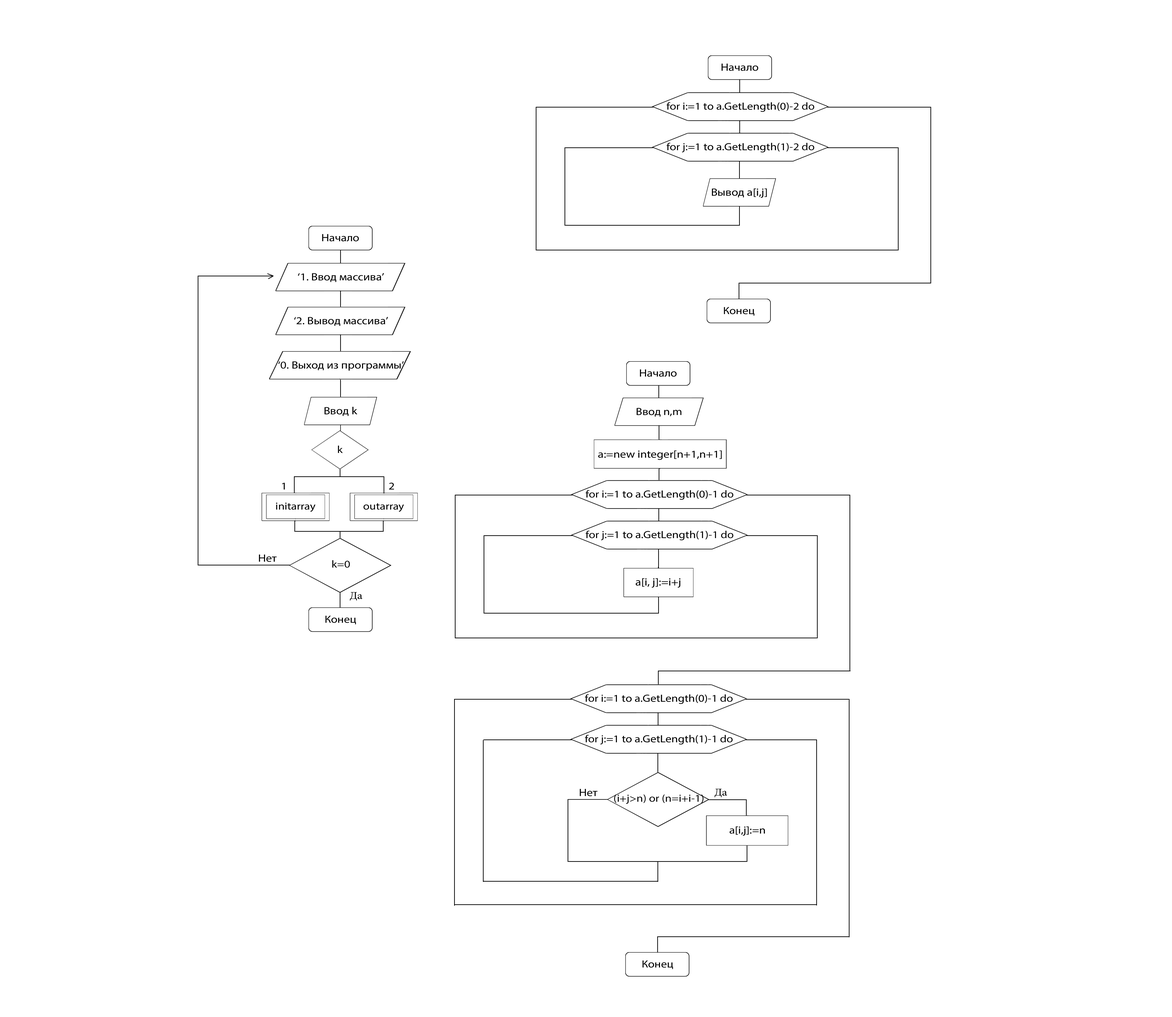
<style>
.page{position:relative;width:1172px;height:1017px;background:#ffffff}
.page>*{position:absolute;margin:0}
.t1{font:10.6px "MyriadPro-Regular";color:#000000;scale:1.14 1}
.t2{font:10.4px "MyriadPro-Regular";color:#000000;scale:1.14 1}
.t3{font:10.2px "MyriadPro-Regular";color:#000000;scale:1.14 1}
.t4{font:10.6px "MyriadPro-Regular";color:#000000;scale:1.13 1}
</style>
<div class="page">
<p class="t1" style="left:721px;top:63px;width:37px;height:8px">Начало</p>
<p class="t2" style="left:666px;top:102px;width:148px;height:10px">for i:=1 to a.GetLength(0)-2 do</p>
<p class="t2" style="left:666px;top:143px;width:148px;height:10px">for j:=1 to a.GetLength(1)-2 do</p>
<p class="t1" style="left:712px;top:188px;width:55px;height:10px">Вывод a[i,j]</p>
<p class="t1" style="left:322px;top:234px;width:37px;height:8px">Начало</p>
<p class="t1" style="left:298px;top:273px;width:86px;height:9px">‘1. Ввод массива’</p>
<p class="t1" style="left:294px;top:317px;width:94px;height:9px">‘2. Вывод массива’</p>
<p class="t2" style="left:724px;top:307px;width:30px;height:9px">Конец</p>
<p class="t1" style="left:278px;top:361px;width:126px;height:10px">‘0. Выход из программы’</p>
<p class="t1" style="left:640px;top:369px;width:37px;height:8px">Начало</p>
<p class="t1" style="left:324px;top:407px;width:33px;height:9px">Ввод k</p>
<p class="t2" style="left:636px;top:408px;width:46px;height:9px">Ввод n,m</p>
<p class="t2" style="left:338px;top:446px;width:5px;height:7px">k</p>
<p class="t1" style="left:598px;top:451px;width:124px;height:9px">a:=new integer[n+1,n+1]</p>
<p class="t2" style="left:282px;top:483px;width:3px;height:7px">1</p>
<p class="t2" style="left:389px;top:483px;width:5px;height:7px">2</p>
<p class="t2" style="left:586px;top:490px;width:147px;height:10px">for i:=1 to a.GetLength(0)-1 do</p>
<p class="t3" style="left:276px;top:503px;width:39px;height:9px">initarray</p>
<p class="t3" style="left:364px;top:503px;width:40px;height:9px">outarray</p>
<p class="t2" style="left:586px;top:531px;width:147px;height:10px">for j:=1 to a.GetLength(1)-1 do</p>
<p class="t4" style="left:259px;top:555px;width:18px;height:7px">Нет</p>
<p class="t2" style="left:332px;top:560px;width:18px;height:8px">k=0</p>
<p class="t1" style="left:636px;top:578px;width:45px;height:10px">a[i, j]:=i+j</p>
<p class="t2" style="left:325px;top:616px;width:31px;height:9px">Конец</p>
<p class="t2" style="left:585px;top:695px;width:148px;height:9px">for i:=1 to a.GetLength(0)-1 do</p>
<p class="t2" style="left:585px;top:735px;width:148px;height:10px">for j:=1 to a.GetLength(1)-1 do</p>
<p class="t4" style="left:580px;top:789px;width:18px;height:8px">Нет</p>
<p class="t2" style="left:614px;top:795px;width:89px;height:9px">(i+j&gt;n) or (n=i+i-1)</p>
<p class="t2" style="left:729px;top:827px;width:36px;height:9px">a[i,j]:=n</p>
<p class="t2" style="left:642px;top:961px;width:31px;height:9px">Конец</p>
</div>
